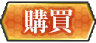
<style>
.page{position:relative;width:96px;height:43px}
.page>*{position:absolute;margin:0}
.t1{font:26px "RyuminPr6N-ExBold";color:#fffffa}
</style>
<div class="page">
<p class="t1" style="left:23px;top:9px;width:50px;height:25px">購買</p>
</div>
